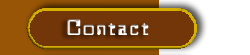
<style>
.page{position:relative;width:250px;height:55px;background:#733609}
.page>*{position:absolute;margin:0}
.t1{font:24px "Westminster";letter-spacing:0.1em}
</style>
<div class="page">
<p class="t1" style="left:67px;top:19px;width:82px;height:16px">Contact</p>
</div>
